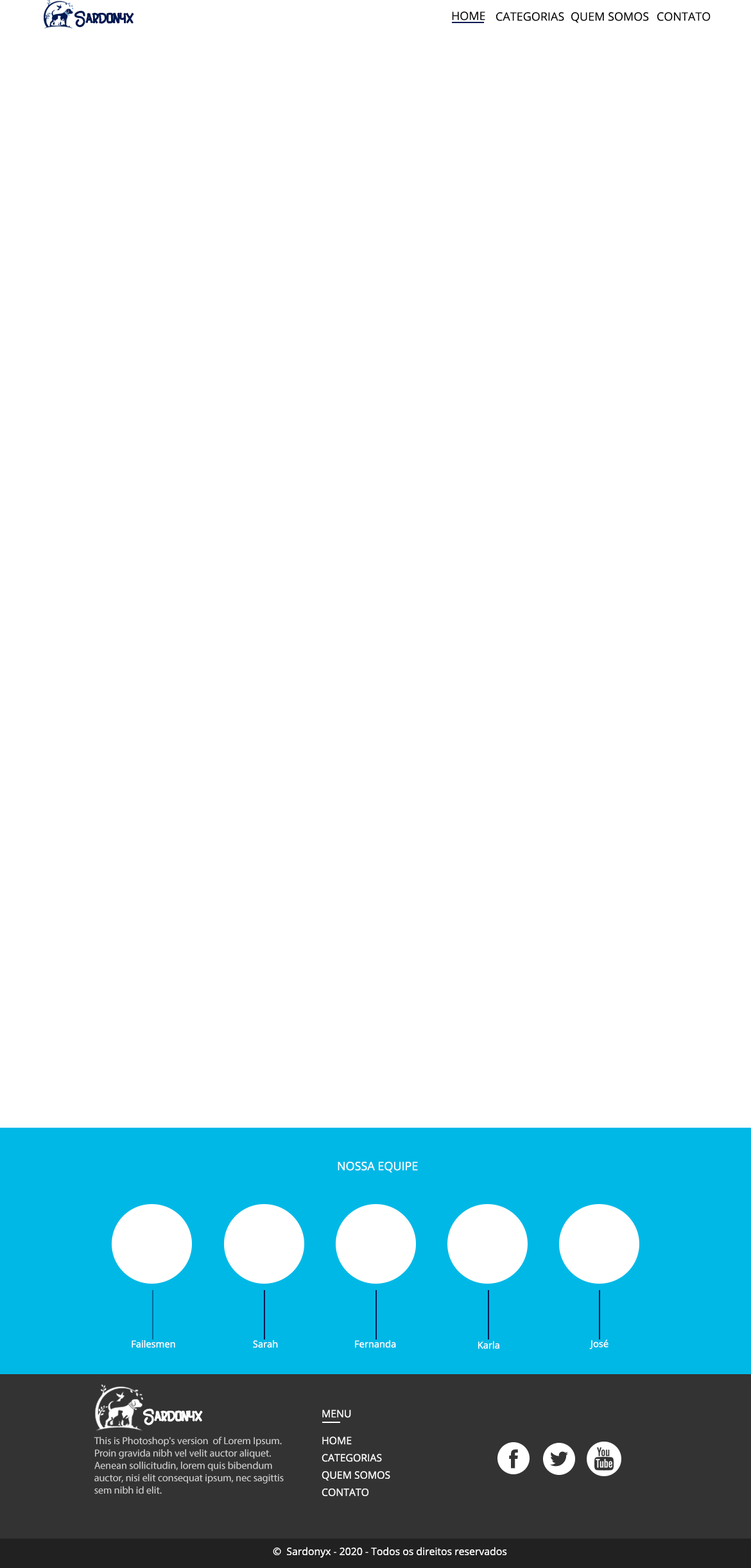
<style>
.page{position:relative;width:751px;height:1568px;background:#ffffff}
.page>*{position:absolute;margin:0}
.t1{font:19.3px "BlackAnimal";color:#011952}
.t2{font:11.6px "OpenSans";color:#000000}
.t3{font:11.6px "OpenSans";color:#ffffff}
.t4{font:9.4px "OpenSans";color:#ffffff}
.t5{font:19.3px "BlackAnimal";color:#ffffff}
.t6{font:10.1px "OpenSans";color:#ffffff}
</style>
<div class="page">
<p class="t1" style="left:74px;top:10px;width:60px;height:18px">Sardonyx</p>
<p class="t2" style="left:452px;top:12px;width:33px;height:9px">HOME</p>
<p class="t2" style="left:496px;top:12px;width:68px;height:9px">CATEGORIAS</p>
<p class="t2" style="left:571px;top:12px;width:78px;height:11px">QUEM SOMOS</p>
<p class="t2" style="left:657px;top:12px;width:54px;height:9px">CONTATO</p>
<p class="t3" style="left:338px;top:1162px;width:80px;height:11px">NOSSA EQUIPE</p>
<p class="t4" style="left:132px;top:1340px;width:43px;height:8px">Failesmen</p>
<p class="t4" style="left:253px;top:1340px;width:25px;height:8px">Sarah</p>
<p class="t4" style="left:355px;top:1340px;width:41px;height:8px">Fernanda</p>
<p class="t4" style="left:478px;top:1341px;width:21px;height:8px">Karla</p>
<p class="t4" style="left:589px;top:1340px;width:19px;height:9px">José</p>
<p class="t5" style="left:143px;top:1408px;width:60px;height:18px">Sardonyx</p>
<p class="t6" style="left:322px;top:1409px;width:68px;height:87px">MENU<br><br><br>HOME<br>        <br><br>CATEGORIAS<br><br><br>QUEM SOMOS<br><br><br>CONTATO</p>
<p class="t6" style="left:273px;top:1547px;width:234px;height:11px">©  Sardonyx - 2020 - Todos os direitos reservados</p>
</div>
